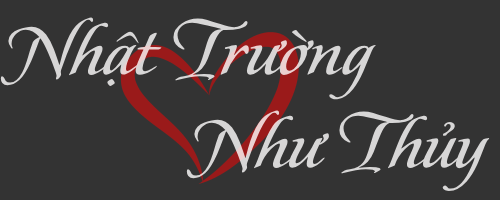
<style>
.page{position:relative;width:500px;height:200px;background:#333333}
.page>*{position:absolute;margin:0}
.t1{font:80px "UVNMauTim2";color:#d7d6d6}
</style>
<div class="page">
<p class="t1" style="left:0px;top:17px;width:376px;height:83px">Nhật Trường</p>
<p class="t1" style="left:186px;top:110px;width:304px;height:81px">Như Thủy</p>
</div>
